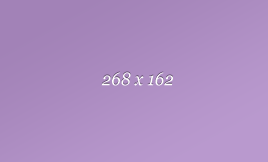
<style>
.page{position:relative;width:268px;height:162px}
.page>*{position:absolute;margin:0}
.t1{font:18px "Georgia-Italic";letter-spacing:0.01em;color:#ffffff;scale:0.92 1}
</style>
<div class="page">
<p class="t1" style="left:101px;top:72px;width:72px;height:14px">268 x 162</p>
</div>
